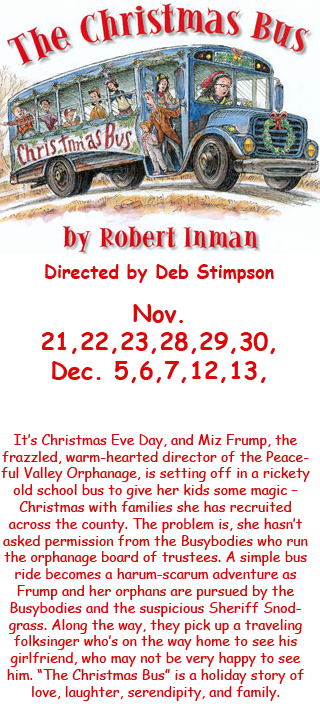
<style>
.page{position:relative;width:320px;height:720px;background:#ffffff}
.page>*{position:absolute;margin:0}
.t1{font:18px "ComicSansMS-Bold";color:#da0808}
.t2{font:24px "ComicSansMS-Bold";color:#da0808}
.t3{font:14px "ComicSansMS";color:#da0808}
</style>
<div class="page">
<p class="t1" style="left:45px;top:264px;width:229px;height:19px">Directed by Deb Stimpson</p>
<p class="t2" style="left:42px;top:304px;width:233px;height:79px;text-align:center">Nov. 21,22,23,28,29,30,<br>Dec. 5,6,7,12,13,</p>
<p class="t3" style="left:1px;top:434px;width:309px;height:267px;text-align:center">It’s Christmas Eve Day, and Miz Frump, the frazzled, warm-hearted director of the Peaceful Valley Orphanage, is setting off in a rickety old school bus to give her kids some magic – Christmas with families she has recruited across the county. The problem is, she hasn’t asked permission from the Busybodies who run the orphanage board of trustees. A simple bus ride becomes a harum-scarum adventure as Frump and her orphans are pursued by the Busybodies and the suspicious Sheriff Snodgrass. Along the way, they pick up a traveling folksinger who’s on the way home to see his girlfriend, who may not be very happy to see him. “The Christmas Bus” is a holiday story of love, laughter, serendipity, and family.</p>
</div>
